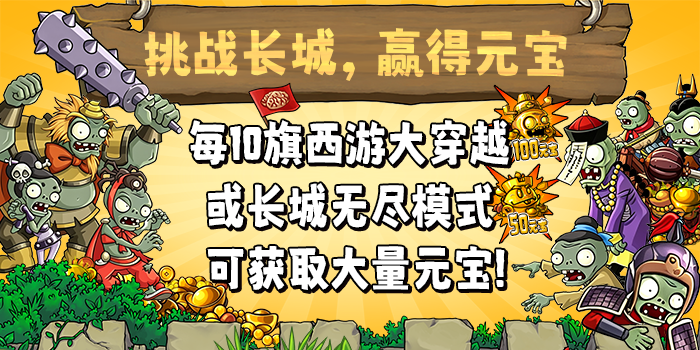
<style>
.page{position:relative;width:700px;height:350px}
.page>*{position:absolute;margin:0}
.t1{font:54.1px "MaokenAssortedSansBold-Regular";color:#ffd86b}
.t2{font:54.1px "NishikitekiBold-Regular";color:#ffd86b}
.t3{font:50.5px/62.1px "MaokenAssortedSansBold-Regular";color:#ffffff;scale:0.91 1}
.t4{font:50.5px/62.1px "HouseofTerror";color:#ffffff;scale:0.91 1}
.t5{font:28.8px "HouseofTerror";scale:0.75 1}
.t6{font:13.8px "MaokenAssortedSansBold-Regular";font-weight:bold;scale:0.75 1}
</style>
<div class="page">
<p class="t1" style="left:144px;top:27px;width:423px;height:54px">挑战长城<span class="t2">，</span>赢得元宝</p>
<p class="t3" style="left:190px;top:120px;width:319px;height:170px;text-align:center">每<span class="t4">10</span>旗西游大穿越<br>或长城无尽模式<br> 可获取大量元宝<span class="t4">!</span></p>
<p class="t5" style="left:513px;top:139px;width:45px;height:21px;rotate:-7deg">100<span class="t6">元宝</span></p>
<p class="t5" style="left:509px;top:213px;width:38px;height:22px;rotate:-7deg">50<span class="t6">元宝</span></p>
</div>
